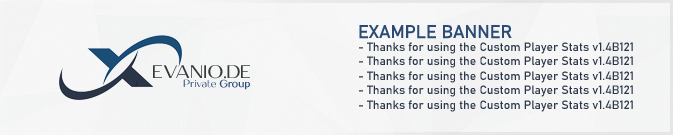
<style>
.page{position:relative;width:673px;height:135px}
.page>*{position:absolute;margin:0}
.t1{font:18px "Bahnschrift";color:#2b4b76;text-transform:uppercase}
.t2{font:12px "Bahnschrift";color:#2b3648}
</style>
<div class="page">
<p class="t1" style="left:359px;top:25px;width:153px;height:14px">Example banner</p>
<p class="t2" style="left:359px;top:42px;width:274px;height:70px">- Thanks for using the Custom Player Stats v1.4B121<br>- Thanks for using the Custom Player Stats v1.4B121<br>- Thanks for using the Custom Player Stats v1.4B121<br>- Thanks for using the Custom Player Stats v1.4B121<br>- Thanks for using the Custom Player Stats v1.4B121</p>
</div>
